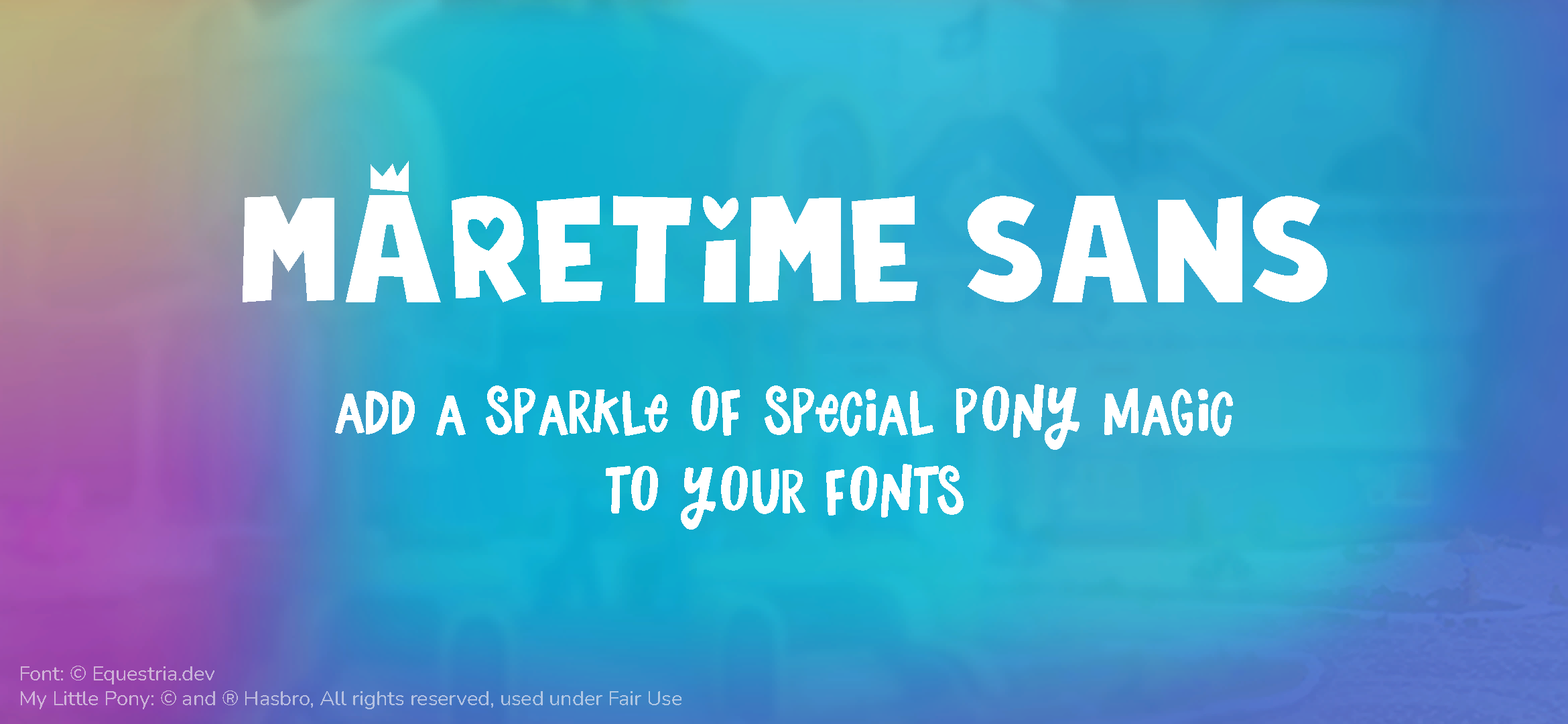
<style>
.page{position:relative;width:1568px;height:724px}
.page>*{position:absolute;margin:0}
.t1{font:265.8px "MLPMaretimeSansRegular";color:#ffffff}
.t2{font:66.3px "MLPFindYourSparkleRegular";color:#ffffff}
.t3{font:20.4px "Nunito-Regular";color:#bdbadc}
</style>
<div class="page">
<p class="t1" style="left:243px;top:161px;width:1084px;height:141px">MARETIME SaNS</p>
<p class="t2" style="left:335px;top:384px;width:898px;height:145px;text-align:center">Add a sparkle of special pony magic<br>to your fonts</p>
<p class="t3" style="left:21px;top:665px;width:660px;height:44px">Font: © Equestria.dev<br>My Little Pony: © and ® Hasbro, All rights reserved, used under Fair Use</p>
</div>
